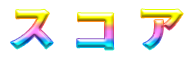
<style>
.page{position:relative;width:192px;height:64px;background:#ffffff}
.page>*{position:absolute;margin:0}
.t1{font:48px "SourceHanSans-Heavy"}
</style>
<div class="page">
<p class="t1" style="left:11px;top:9px;width:42px;height:40px">ス</p>
<p class="t1" style="left:77px;top:13px;width:37px;height:37px">コ</p>
<p class="t1" style="left:141px;top:9px;width:42px;height:41px">ア</p>
</div>
